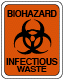
<style>
.page{position:relative;width:64px;height:80px}
.page>*{position:absolute;margin:0}
.t1{font:9px "Helvetica-Bold";letter-spacing:-0.02em;color:#000000;scale:0.95 1}
.t2{font:9px/7px "Helvetica-Bold";letter-spacing:-0.02em;color:#000000;scale:0.96 1}
.t3{font:9px/7px "Helvetica-Bold";color:#000000;scale:0.94 1}
.t4{font:10px/7px "Helvetica-Bold";letter-spacing:-0.02em;color:#000000;scale:0.96 1}
.t5{font:8px/7px "Helvetica-Bold";letter-spacing:-0.02em;color:#000000;scale:1.07 1}
</style>
<div class="page">
<p class="t1" style="left:7px;top:10px;width:50px;height:7px">BIOHAZARD</p>
<p class="t2" style="left:6px;top:58px;width:52px;height:14px;text-align:center"><span class="t3"> </span>INF<span class="t4">E</span>CTIOUS<br><span class="t5"> WASTE</span></p>
</div>
